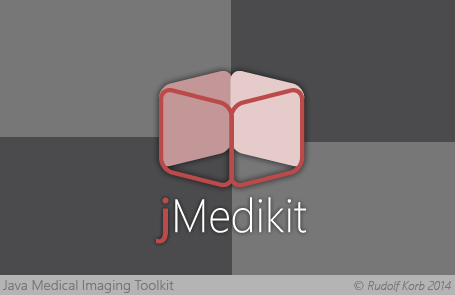
<style>
.page{position:relative;width:455px;height:295px;background:#4b4b4d}
.page>*{position:absolute;margin:0}
.t1{font:14px "WeblySleekUISemilight";color:#777777}
.t2{font:12px "WeblySleekUILight-Italic";color:#777777}
</style>
<div class="page">
<p class="t1" style="left:3px;top:280px;width:171px;height:13px">Java Medical Imaging Toolkit</p>
<p class="t2" style="left:354px;top:281px;width:97px;height:11px">© Rudolf Korb 2014</p>
</div>
